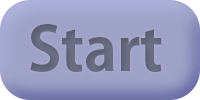
<style>
.page{position:relative;width:200px;height:100px;background:#9fa2c7}
.page>*{position:absolute;margin:0}
.t1{font:60px "AdobeGothicStd-Bold";color:#6b6d83}
</style>
<div class="page">
<p class="t1" style="left:30px;top:24px;width:132px;height:48px">Start</p>
</div>
